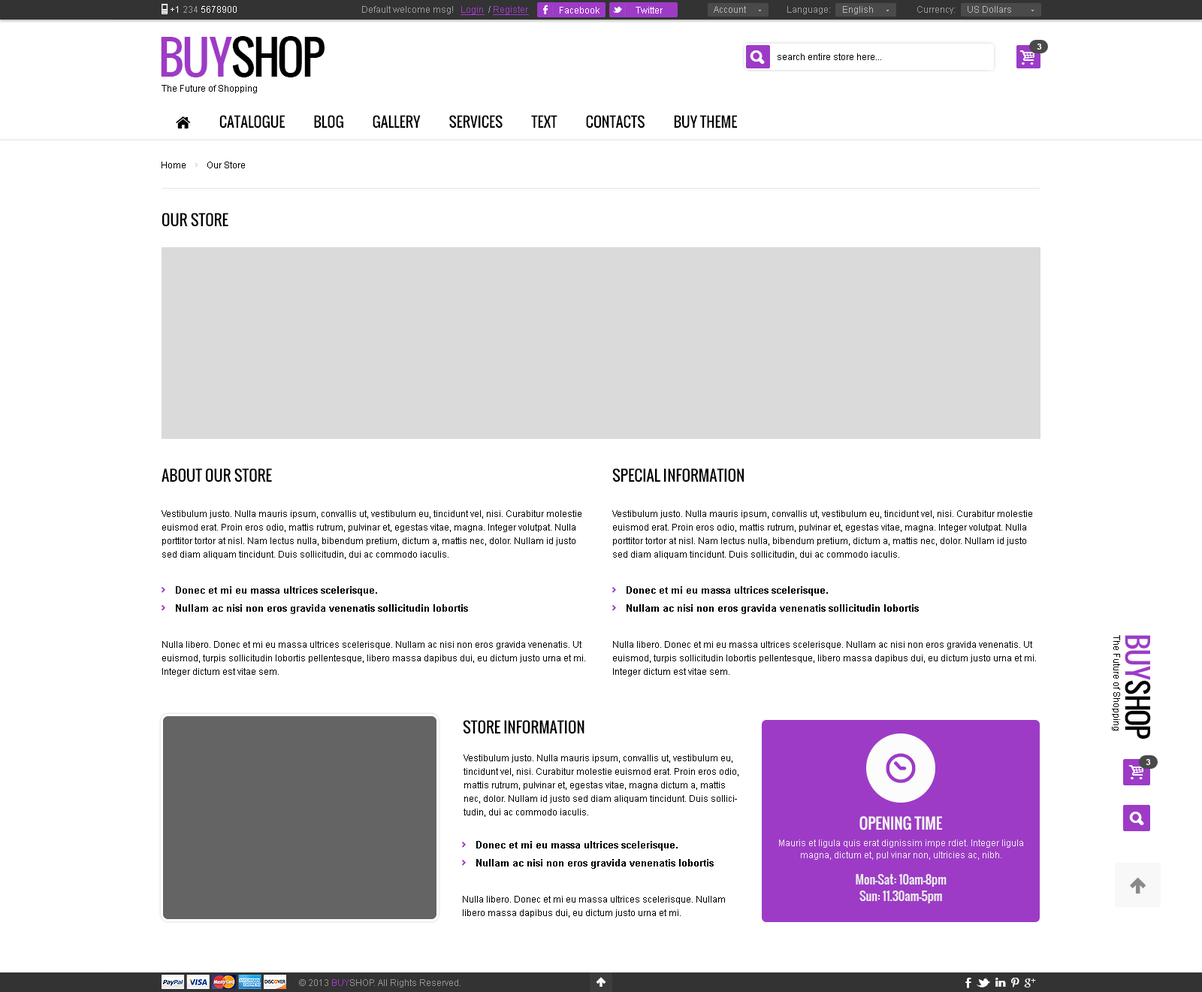
<style>
.page{position:relative;width:1202px;height:992px;background:#ffffff}
.page>*{position:absolute;margin:0}
.t1{font:9px "ArialMT";color:#ffffff}
.t2{font:9px "ArialMT";color:#9b9b9b}
.t3{font:9px "ArialMT";color:#9d3bc6;text-decoration:underline}
.t4{font:9px "ArialMT";color:#b6b6b6}
.t5{font:45.1px "Oswald";letter-spacing:-0.06em;color:#000000;text-transform:uppercase}
.t6{font:45.1px "Oswald";letter-spacing:-0.06em;color:#9d3bc6;text-transform:uppercase}
.t7{font:9px "ArialMT";color:#000000}
.t8{font:8.3px "Arial-BoldMT";color:#ffffff;text-transform:uppercase}
.t9{font:15px "Oswald";color:#000000;text-transform:uppercase}
.t10{font:9px/13.5px "ArialMT";color:#000000}
.t11{font:9.8px/18px "Arial-BoldMT";color:#000000}
.t12{font:28.6px "Oswald";letter-spacing:-0.06em;color:#000000;text-transform:uppercase}
.t13{font:28.6px "Oswald";letter-spacing:-0.06em;color:#9d3bc6;text-transform:uppercase}
.t14{font:15px "Oswald";color:#f3f3f3;text-transform:uppercase}
.t15{font:9px/12px "ArialMT";color:#ececec}
.t16{font:12px/16.5px "Oswald";color:#ececec}
.t17{font:9px "ArialMT";color:#959595}
.t18{font:9px "ArialMT";color:#9d3bc6}
</style>
<div class="page">
<p class="t1" style="left:171px;top:6px;width:66px;height:7px">+1 <span class="t2">234 </span>5678900</p>
<p class="t2" style="left:362px;top:6px;width:167px;height:9px">Default welcome msg!   <span class="t3">Login </span> / <span class="t3">Register</span></p>
<p class="t2" style="left:362px;top:6px;width:167px;height:9px">Default welcome msg!   <span class="t3">Login </span> / <span class="t3">Register</span></p>
<p class="t1" style="left:560px;top:7px;width:40px;height:7px">Facebook</p>
<p class="t1" style="left:636px;top:7px;width:27px;height:7px">Twitter</p>
<p class="t4" style="left:714px;top:6px;width:32px;height:7px">Account</p>
<p class="t2" style="left:787px;top:6px;width:86px;height:8px">Language:     <span class="t4">English</span></p>
<p class="t4" style="left:917px;top:6px;width:94px;height:8px"><span class="t2">Currency:     </span>US Dollars</p>
<p class="t5" style="left:161px;top:36px;width:164px;height:41px"><span class="t6">buy</span>shop</p>
<p class="t7" style="left:778px;top:53px;width:103px;height:7px">search entire store here...</p>
<p class="t8" style="left:1037px;top:44px;width:5px;height:6px">3</p>
<p class="t7" style="left:162px;top:85px;width:95px;height:8px">The Future of Shopping</p>
<p class="t7" style="left:162px;top:162px;width:83px;height:6px">Home         Our Store</p>
<p class="t9" style="left:162px;top:213px;width:66px;height:14px">Our Store</p>
<p class="t9" style="left:162px;top:468px;width:110px;height:14px">ABOUT OUR STORE</p>
<p class="t9" style="left:612px;top:468px;width:132px;height:14px">SPECIAL INFORMATION</p>
<p class="t10" style="left:162px;top:510px;width:420px;height:49px">Vestibulum justo. Nulla mauris ipsum, convallis ut, vestibulum eu, tincidunt vel, nisi. Curabitur molestie euismod erat. Proin eros odio, mattis rutrum, pulvinar et, egestas vitae, magna. Integer volutpat. Nulla porttitor tortor at nisl. Nam lectus nulla, bibendum pretium, dictum a, mattis nec, dolor. Nullam id justo sed diam aliquam tincidunt. Duis sollicitudin, dui ac commodo iaculis.</p>
<p class="t10" style="left:612px;top:510px;width:420px;height:49px">Vestibulum justo. Nulla mauris ipsum, convallis ut, vestibulum eu, tincidunt vel, nisi. Curabitur molestie euismod erat. Proin eros odio, mattis rutrum, pulvinar et, egestas vitae, magna. Integer volutpat. Nulla porttitor tortor at nisl. Nam lectus nulla, bibendum pretium, dictum a, mattis nec, dolor. Nullam id justo sed diam aliquam tincidunt. Duis sollicitudin, dui ac commodo iaculis.</p>
<p class="t11" style="left:176px;top:586px;width:292px;height:28px">Donec et mi eu massa ultrices scelerisque. <br>Nullam ac nisi non eros gravida venenatis sollicitudin lobortis</p>
<p class="t11" style="left:627px;top:586px;width:292px;height:28px">Donec et mi eu massa ultrices scelerisque. <br>Nullam ac nisi non eros gravida venenatis sollicitudin lobortis</p>
<p class="t10" style="left:162px;top:641px;width:423px;height:35px">Nulla libero. Donec et mi eu massa ultrices scelerisque. Nullam ac nisi non eros gravida venenatis. Ut euismod, turpis sollicitudin lobortis pellentesque, libero massa dapibus dui, eu dictum justo urna et mi. Integer dictum est vitae sem.</p>
<p class="t10" style="left:613px;top:641px;width:423px;height:35px">Nulla libero. Donec et mi eu massa ultrices scelerisque. Nullam ac nisi non eros gravida venenatis. Ut euismod, turpis sollicitudin lobortis pellentesque, libero massa dapibus dui, eu dictum justo urna et mi. Integer dictum est vitae sem.</p>
<p class="t7" style="left:1112px;top:635px;width:8px;height:95px;rotate:90deg">The Future of Shopping</p>
<p class="t12" style="left:1125px;top:635px;width:26px;height:104px;rotate:90deg"><span class="t13">buy</span>shop</p>
<p class="t9" style="left:463px;top:720px;width:122px;height:14px">STORE INFORMATION</p>
<p class="t10" style="left:464px;top:754px;width:275px;height:63px">Vestibulum justo. Nulla mauris ipsum, convallis ut, vestibulum eu, tincidunt vel, nisi. Curabitur molestie euismod erat. Proin eros odio, mattis rutrum, pulvinar et, egestas vitae, magna dictum a, mattis nec, dolor. Nullam id justo sed diam aliquam tincidunt. Duis sollicitudin, dui ac commodo iaculis.</p>
<p class="t8" style="left:1146px;top:759px;width:5px;height:6px">3</p>
<p class="t14" style="left:860px;top:816px;width:82px;height:14px">OPENING TIME</p>
<p class="t11" style="left:476px;top:841px;width:238px;height:28px">Donec et mi eu massa ultrices scelerisque. <br>Nullam ac nisi non eros gravida venenatis lobortis</p>
<p class="t15" style="left:779px;top:839px;width:244px;height:21px;text-align:center">Mauris et ligula quis erat dignissim impe rdiet. Integer ligula magna, dictum et, pul vinar non, ultricies ac, nibh.</p>
<p class="t16" style="left:856px;top:874px;width:91px;height:29px;text-align:center">Mon-Sat: 10am-8pm<br>Sun: 11.30am-5pm</p>
<p class="t10" style="left:463px;top:896px;width:262px;height:21px">Nulla libero. Donec et mi eu massa ultrices scelerisque. Nullam libero massa dapibus dui, eu dictum justo urna et mi.</p>
<p class="t17" style="left:299px;top:979px;width:162px;height:8px">© 2013 <span class="t18">BUY</span>SHOP. All Rights Reserved.</p>
</div>
